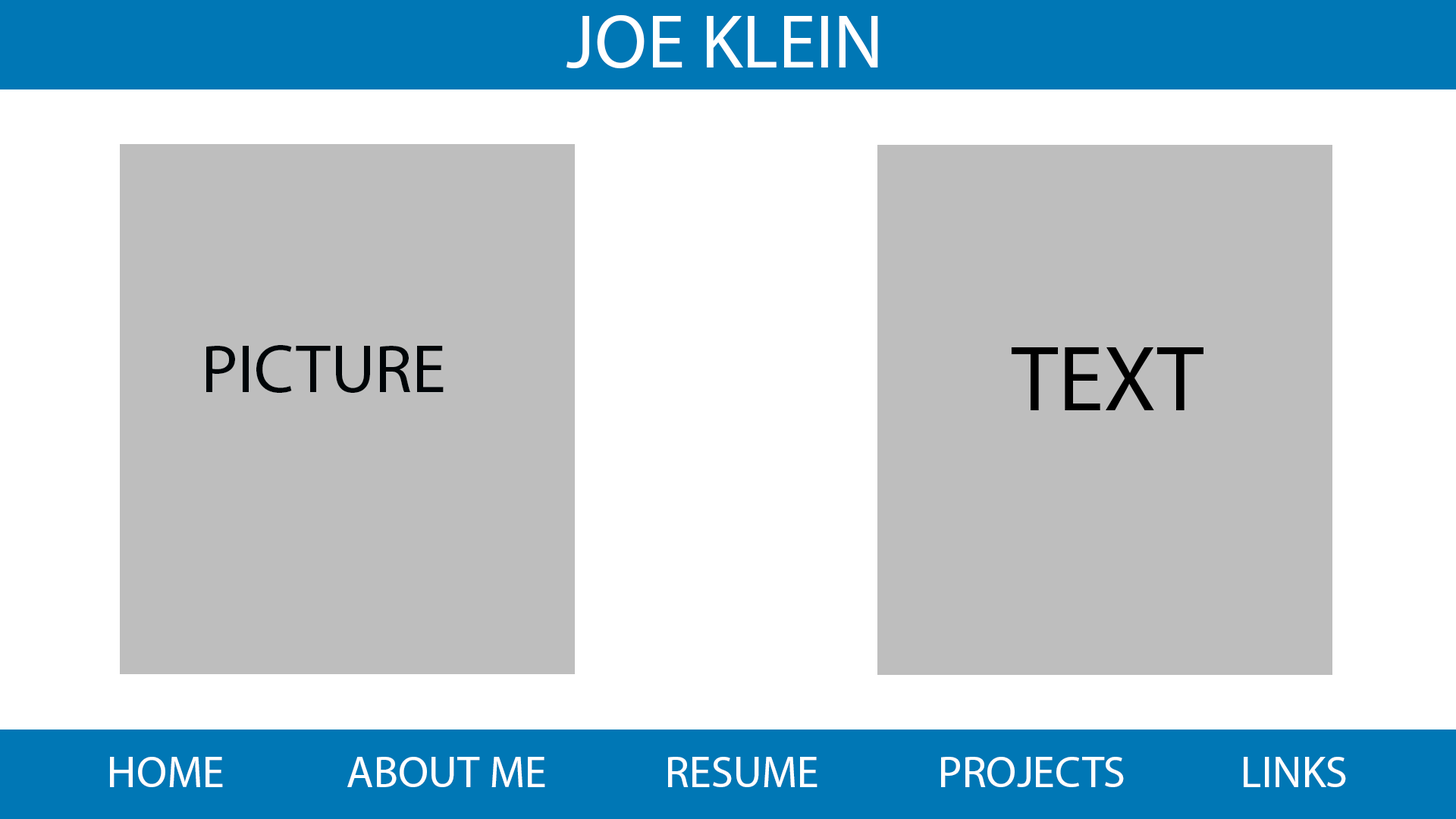
<style>
.page{position:relative;width:1456px;height:819px;background:#bebebe}
.page>*{position:absolute;margin:0}
.t1{font:76.2px "MyriadPro-Regular";color:#ffffff}
.t2{font:69px "MyriadPro-Regular";color:#000508}
.t3{font:92.8px "MyriadPro-Regular";color:#000000}
.t4{font:44.4px "MyriadPro-Regular";color:#ffffff}
</style>
<div class="page">
<p class="t1" style="left:566px;top:14px;width:312px;height:55px">JOE KLEIN</p>
<p class="t2" style="left:206px;top:345px;width:238px;height:48px">PICTURE</p>
<p class="t3" style="left:1011px;top:347px;width:192px;height:63px">TEXT</p>
<p class="t4" style="left:110px;top:757px;width:113px;height:30px">HOME</p>
<p class="t4" style="left:347px;top:757px;width:198px;height:30px">ABOUT ME</p>
<p class="t4" style="left:668px;top:757px;width:149px;height:30px">RESUME</p>
<p class="t4" style="left:941px;top:757px;width:183px;height:30px">PROJECTS</p>
<p class="t4" style="left:1244px;top:757px;width:102px;height:30px">LINKS</p>
</div>
